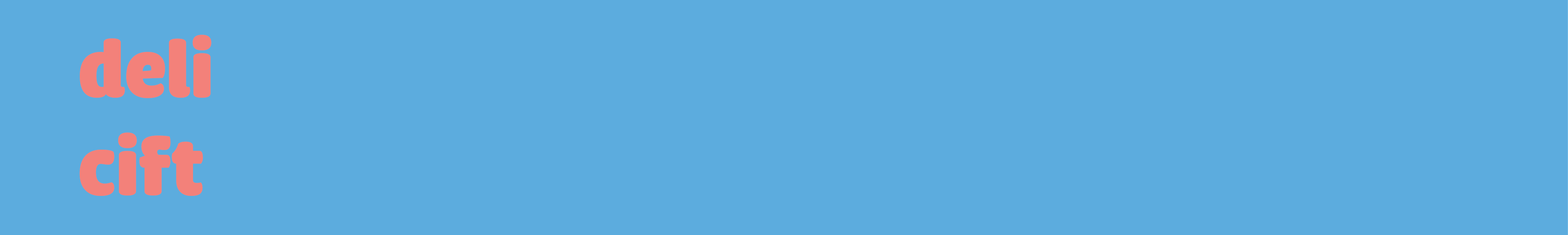
<style>
.page{position:relative;width:1568px;height:235px;background:#5cacde}
.page>*{position:absolute;margin:0}
.t1{font:81.5px "iCielCadena";color:#f3817a}
</style>
<div class="page">
<p class="t1" style="left:79px;top:35px;width:132px;height:161px">deli<br>cift</p>
</div>
